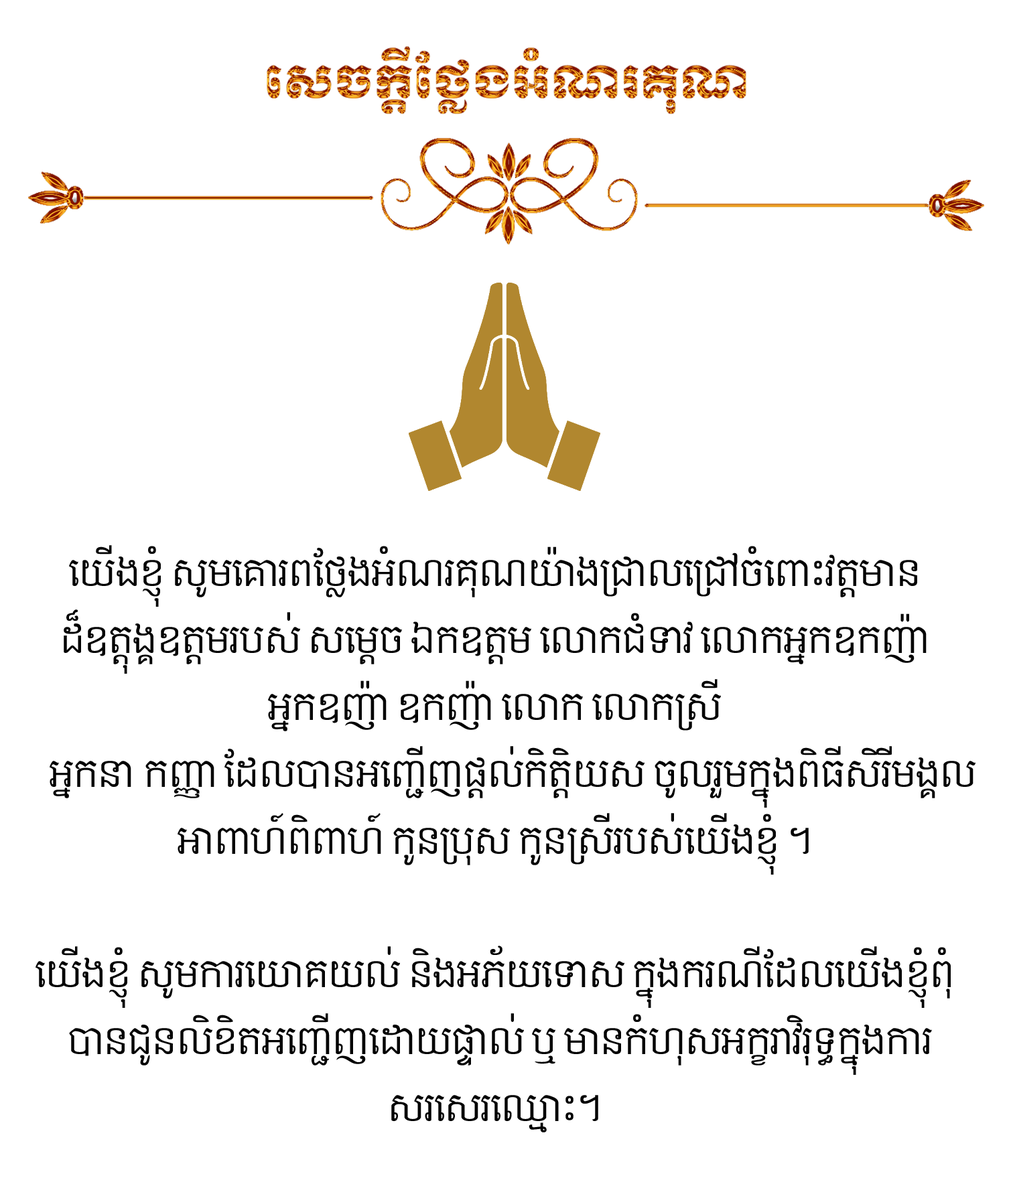
<style>
.page{position:relative;width:1009px;height:1182px;background:#ffffff}
.page>*{position:absolute;margin:0}
.t1{font:35.5px/67px "KhmerOSContent";color:#010101}
</style>
<div class="page">
<p class="t1" style="left:35px;top:545px;width:940px;height:588px;text-align:center">យើងខ្ញុំ សូមគោរពថ្លែងអំណរគុណយ៉ាងជ្រាលជ្រៅចំពោះវត្តមាន <br>ដ៏ឧត្តុង្គឧត្តមរបស់ សម្តេច ឯកឧត្តម លោកជំទាវ លោកអ្នកឧកញ៉ា អ្នកឧញ៉ា ឧកញ៉ា លោក លោកស្រី <br>អ្នកនា កញ្ញា ដែលបានអញ្ជើញផ្តល់កិត្តិយស ចូលរួមក្នុងពិធីសិរីមង្គលអាពាហ៍ពិពាហ៍ កូនប្រុស កូនស្រីរបស់យើងខ្ញុំ ។ <br><br>យើងខ្ញុំ សូមការយោគយល់ និងអភ័យទោស ក្នុងករណីដែលយើងខ្ញុំពុំបានជូនលិខិតអញ្ជើញដោយផ្ទាល់ ឬ មានកំហុសអក្ខរាវិរុទ្ធក្នុងការសរសេរឈ្មោះ។</p>
</div>
